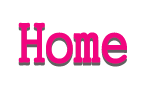
<style>
.page{position:relative;width:150px;height:90px;background:#ffffff}
.page>*{position:absolute;margin:0}
.t1{font:55px "GungsuhChe"}
.t2{font:55px "GungsuhChe";color:#f1057f}
</style>
<div class="page">
<p class="t1" style="left:18px;top:25px;width:109px;height:42px">Home</p>
<p class="t2" style="left:18px;top:22px;width:109px;height:42px">Home</p>
</div>
